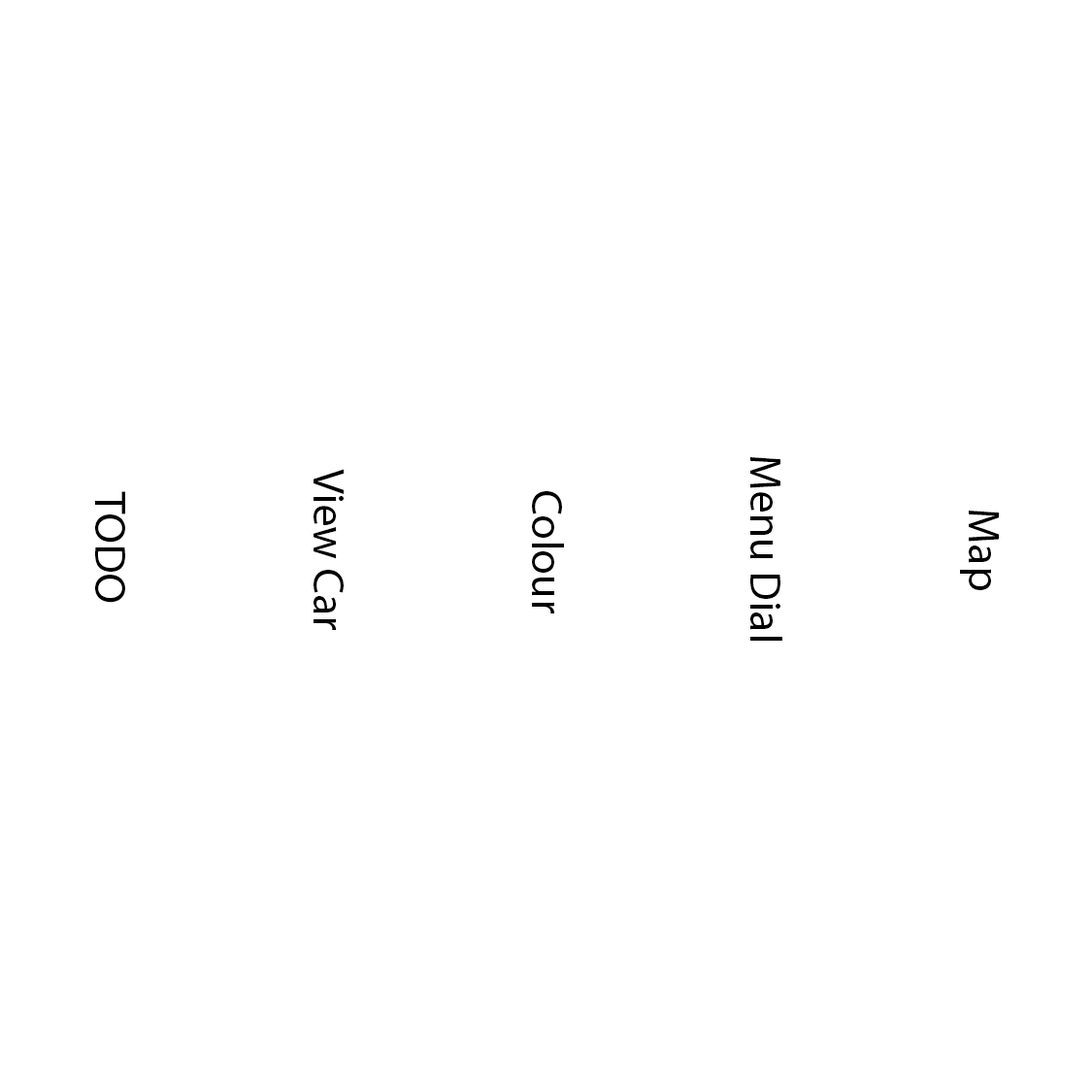
<style>
.page{position:relative;width:1092px;height:1092px;background:#ffffff}
.page>*{position:absolute;margin:0}
.t1{font:44.5px "MyriadPro-Regular";color:#000000}
</style>
<div class="page">
<p class="t1" style="left:750px;top:457px;width:32px;height:184px;rotate:90deg">Menu Dial</p>
<p class="t1" style="left:314px;top:469px;width:30px;height:161px;rotate:90deg">View Car</p>
<p class="t1" style="left:95px;top:491px;width:30px;height:112px;rotate:90deg">TODO</p>
<p class="t1" style="left:532px;top:491px;width:32px;height:122px;rotate:90deg">Colour</p>
<p class="t1" style="left:960px;top:511px;width:39px;height:79px;rotate:90deg">Map</p>
</div>
